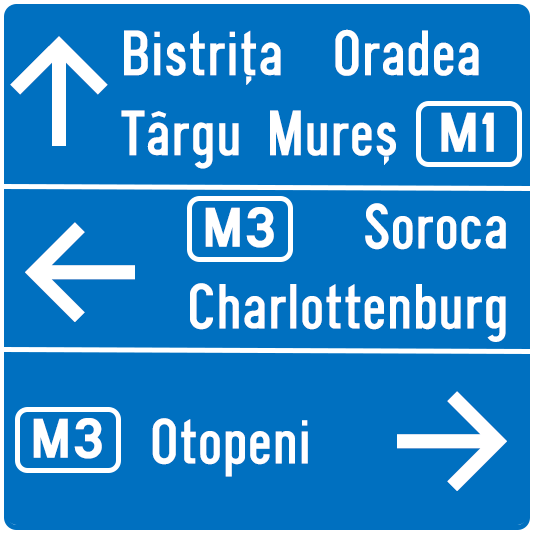
<style>
.page{position:relative;width:533px;height:533px;background:#0070c0}
.page>*{position:absolute;margin:0}
.t1{font:66.7px "SnvBeckerRegCond";color:#ffffff}
.t2{font:150px "Inter-Medium";color:#ffffff}
.t3{font:58.3px "SnvD-Regu";color:#ffffff}
</style>
<div class="page">
<p class="t1" style="left:121px;top:29px;width:358px;height:140px">Bistrița  Oradea<br>Târgu Mureș</p>
<p class="t2" style="left:10px;top:36px;width:98px;height:110px">↑</p>
<p class="t3" style="left:441px;top:112px;width:53px;height:40px">M1</p>
<p class="t1" style="left:190px;top:203px;width:316px;height:139px;text-align:right">Soroca<br>Charlottenburg</p>
<p class="t3" style="left:205px;top:207px;width:69px;height:41px">M3</p>
<p class="t2" style="left:25px;top:222px;width:110px;height:100px">←</p>
<p class="t2" style="left:397px;top:391px;width:110px;height:100px">→</p>
<p class="t3" style="left:33px;top:418px;width:69px;height:41px">M3</p>
<p class="t1" style="left:152px;top:418px;width:156px;height:59px">Otopeni</p>
</div>
